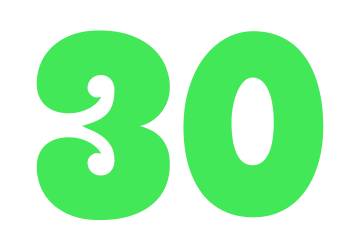
<style>
.page{position:relative;width:354px;height:236px;background:#ffffff}
.page>*{position:absolute;margin:0}
.t1{font:250px "SpicyRice-Regular";color:#43e858}
</style>
<div class="page">
<p class="t1" style="left:36px;top:30px;width:288px;height:191px">30</p>
</div>
